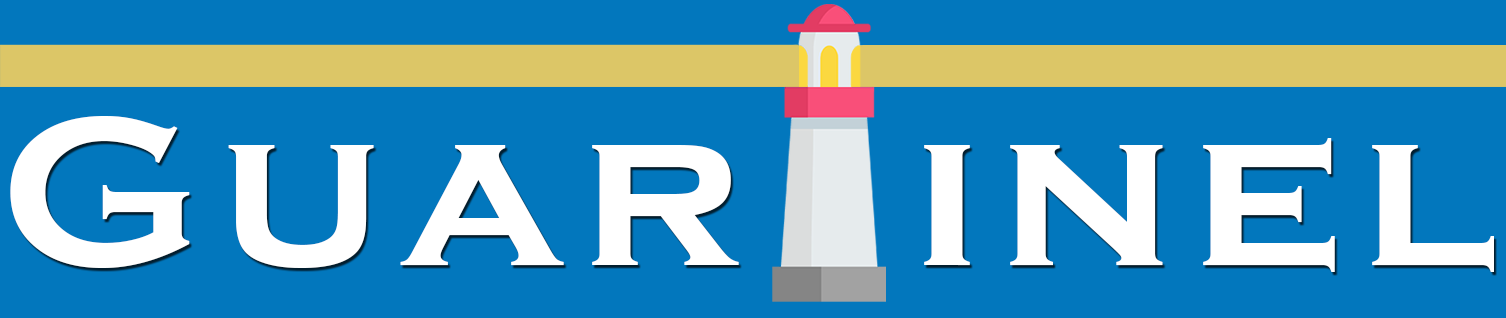
<style>
.page{position:relative;width:1506px;height:318px;background:#0277bd}
.page>*{position:absolute;margin:0}
.t1{font:218.8px "CopperplateGothic-Bold";letter-spacing:0.075em;color:#ffffff;scale:1.08 1}
</style>
<div class="page">
<p class="t1" style="left:10px;top:116px;width:1484px;height:156px">Guar  inel</p>
</div>
